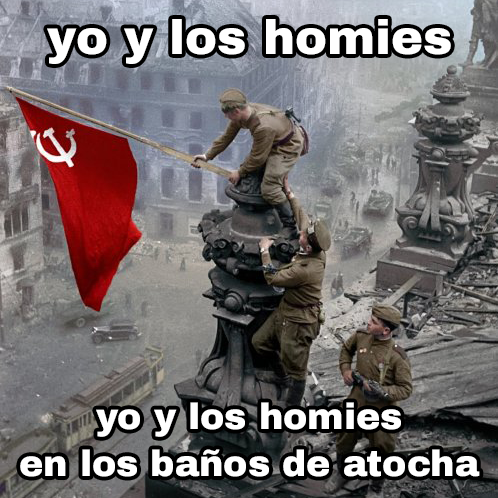
<style>
.page{position:relative;width:498px;height:498px}
.page>*{position:absolute;margin:0}
.t1{font:48px "ArchivoBlack-Regular";color:#ffffff}
.t2{font:36.4px "ArchivoBlack-Regular";color:#ffffff}
</style>
<div class="page">
<p class="t1" style="left:47px;top:19px;width:404px;height:45px">yo y los homies</p>
<p class="t2" style="left:20px;top:402px;width:460px;height:75px;text-align:center">yo y los homies<br>en los baños de atocha</p>
</div>
